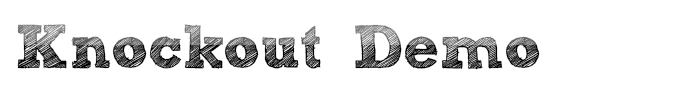
<style>
.page{position:relative;width:686px;height:104px;background:#ffffff}
.page>*{position:absolute;margin:0}
.t1{font:61.3px "freeversionSketchBlock-Bold";letter-spacing:-0.01em}
</style>
<div class="page">
<p class="t1" style="left:17px;top:24px;width:523px;height:46px">Knockout Demo</p>
</div>
